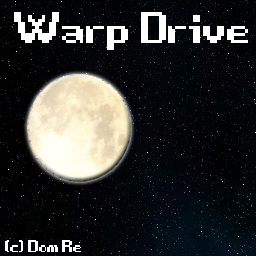
<style>
.page{position:relative;width:256px;height:256px}
.page>*{position:absolute;margin:0}
.t1{font:110px "Game-Over";color:#ffffff}
.t2{font:42px "Game-Over";color:#ffffff}
</style>
<div class="page">
<p class="t1" style="left:14px;top:12px;width:234px;height:38px">Warp Drive</p>
<p class="t2" style="left:5px;top:240px;width:76px;height:12px">(c) Dom Re</p>
</div>
